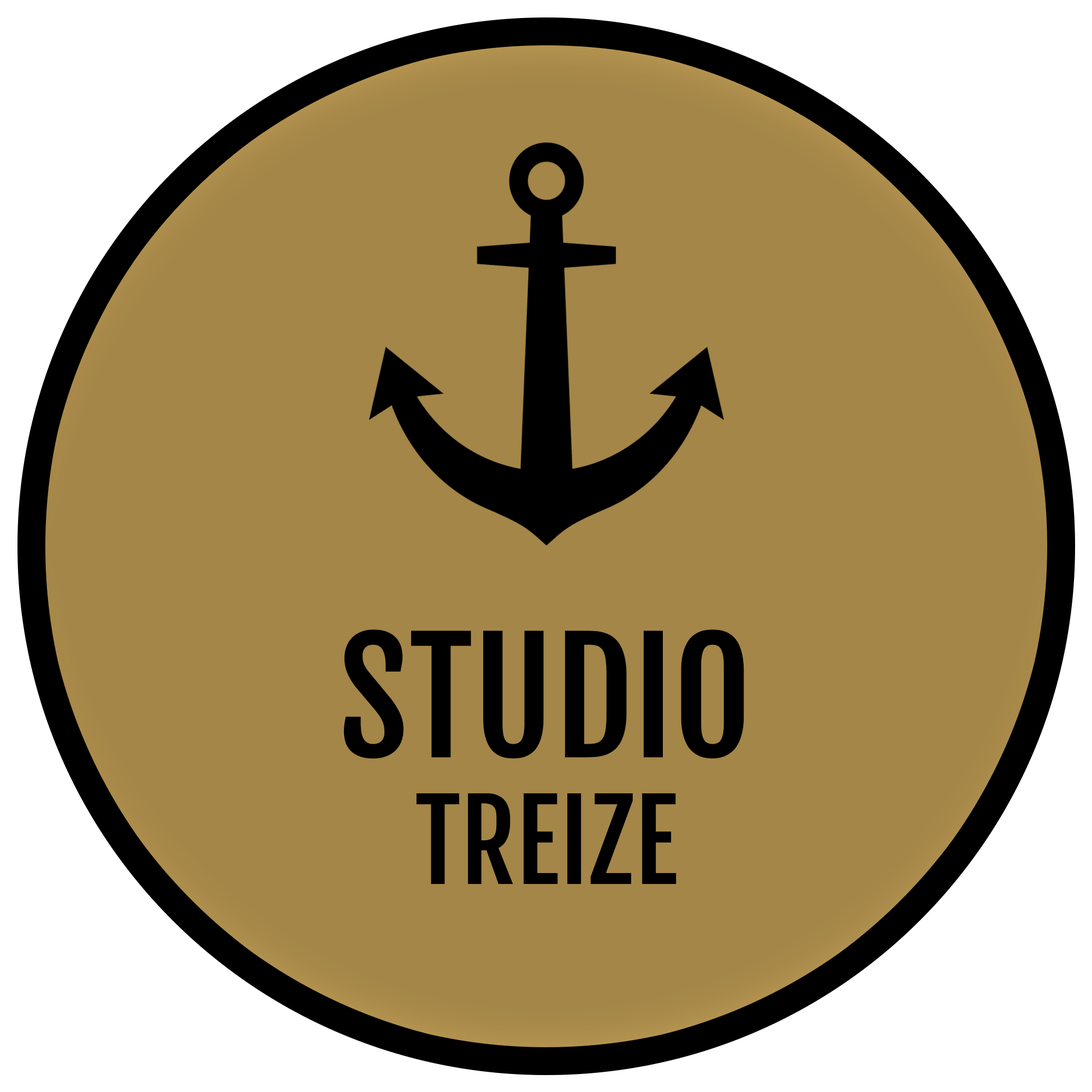
<style>
.page{position:relative;width:1092px;height:1092px;background:#a48648}
.page>*{position:absolute;margin:0}
.t1{font:151.8px "FjallaOne-Regular";color:#000000}
.t2{font:108.1px "FjallaOne-Regular";color:#000000}
</style>
<div class="page">
<p class="t1" style="left:343px;top:630px;width:401px;height:129px">STUDIO</p>
<p class="t2" style="left:416px;top:793px;width:260px;height:91px">TREIZE</p>
</div>
